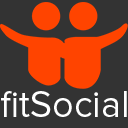
<style>
.page{position:relative;width:128px;height:128px;background:#333333}
.page>*{position:absolute;margin:0}
.t1{font:37.7px "ProximaNova-Regular";color:#ffffff}
</style>
<div class="page">
<p class="t1" style="left:1px;top:91px;width:126px;height:26px">fitSocial</p>
</div>
